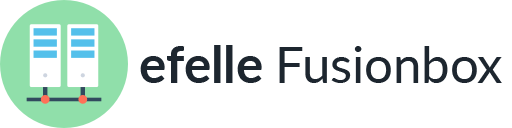
<style>
.page{position:relative;width:512px;height:128px;background:#ffffff}
.page>*{position:absolute;margin:0}
.t1{font:50.7px "Lato-Regular";color:#1d262f}
.t2{font:50.7px "Lato-Bold";color:#1d262f}
</style>
<div class="page">
<p class="t1" style="left:140px;top:45px;width:362px;height:38px"><span class="t2">efelle </span>Fusionbox</p>
</div>
